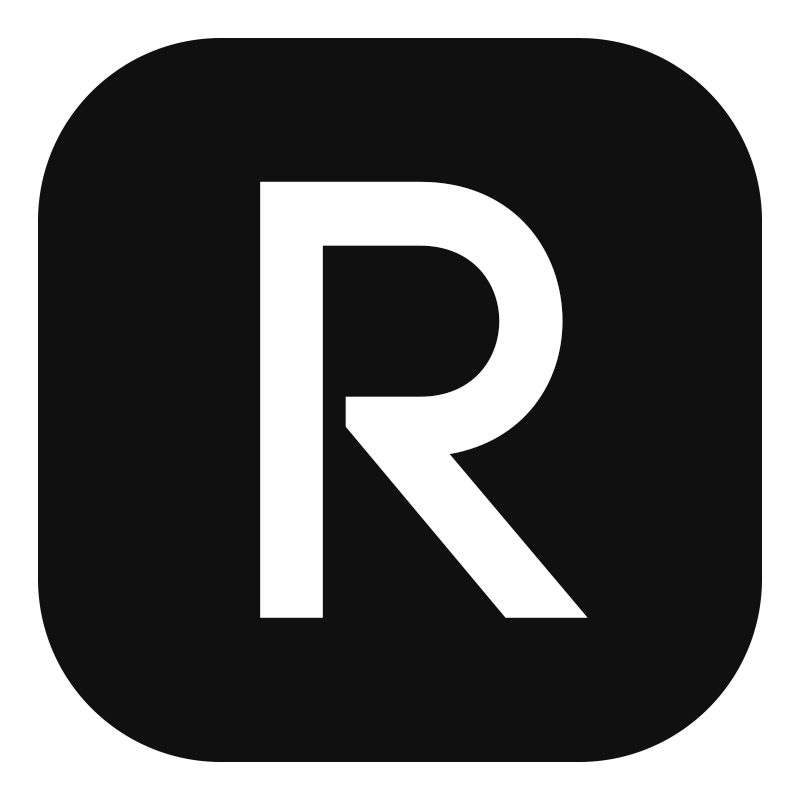
<style>
.page{position:relative;width:800px;height:800px;background:#101010}
.page>*{position:absolute;margin:0}
.t1{font:624.1px "Code-Bold";letter-spacing:-0.025em;color:#ffffff}
</style>
<div class="page">
<p class="t1" style="left:260px;top:181px;width:328px;height:437px">R</p>
</div>
